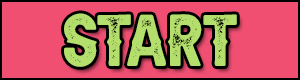
<style>
.page{position:relative;width:300px;height:80px;background:#f04f72}
.page>*{position:absolute;margin:0}
.t1{font:45px "AldivaroStampDemo-Stamp";color:#b4df6c}
</style>
<div class="page">
<p class="t1" style="left:64px;top:13px;width:173px;height:54px">Start</p>
</div>
